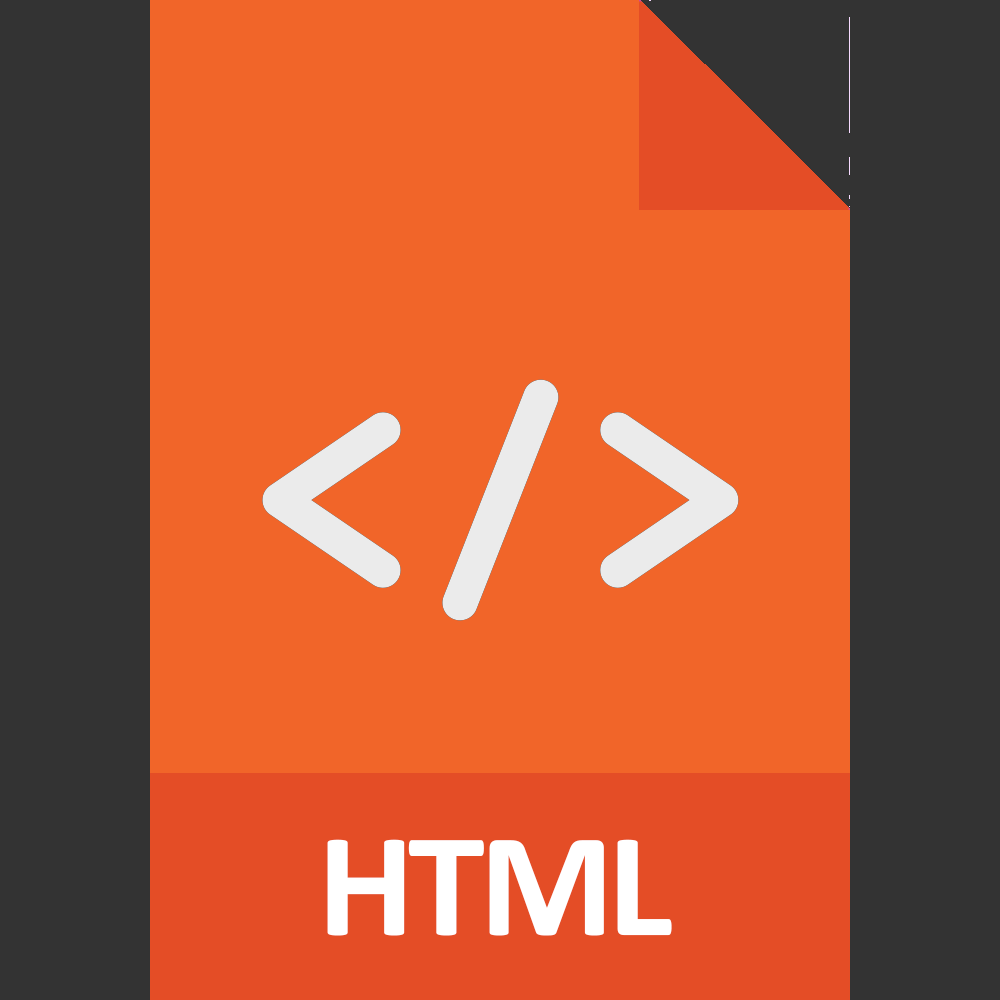
<style>
.page{position:relative;width:1000px;height:1000px;background:#f16529}
.page>*{position:absolute;margin:0}
.t1{font:150px "Calibri-Bold";letter-spacing:-0.04em;color:#ffffff;scale:1.03 1}
</style>
<div class="page">
<p class="t1" style="left:327px;top:839px;width:345px;height:97px">HTML</p>
</div>
